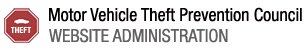
<style>
.page{position:relative;width:306px;height:50px;background:#ffffff}
.page>*{position:absolute;margin:0}
.t1{font:18px "HelveticaNeueLT-Condensed";color:#060000}
.t2{font:8px "HelveticaLT-Condensed-Black";color:#ffffff}
.t3{font:18px "HelveticaNeueLT-Condensed";color:#626060}
</style>
<div class="page">
<p class="t1" style="left:49px;top:7px;width:253px;height:15px">Motor Vehicle Theft Prevention Council</p>
<p class="t2" style="left:11px;top:27px;width:20px;height:6px">THEFT</p>
<p class="t3" style="left:49px;top:28px;width:179px;height:15px">WEBSITE ADMINISTRATION</p>
</div>
